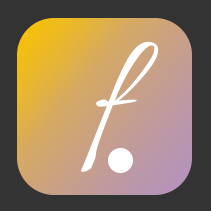
<style>
.page{position:relative;width:211px;height:211px;background:#333333}
.page>*{position:absolute;margin:0}
.t1{font:138px "Allura-Regular";color:#ffffff}
</style>
<div class="page">
<p class="t1" style="left:81px;top:41px;width:78px;height:131px">f</p>
</div>
